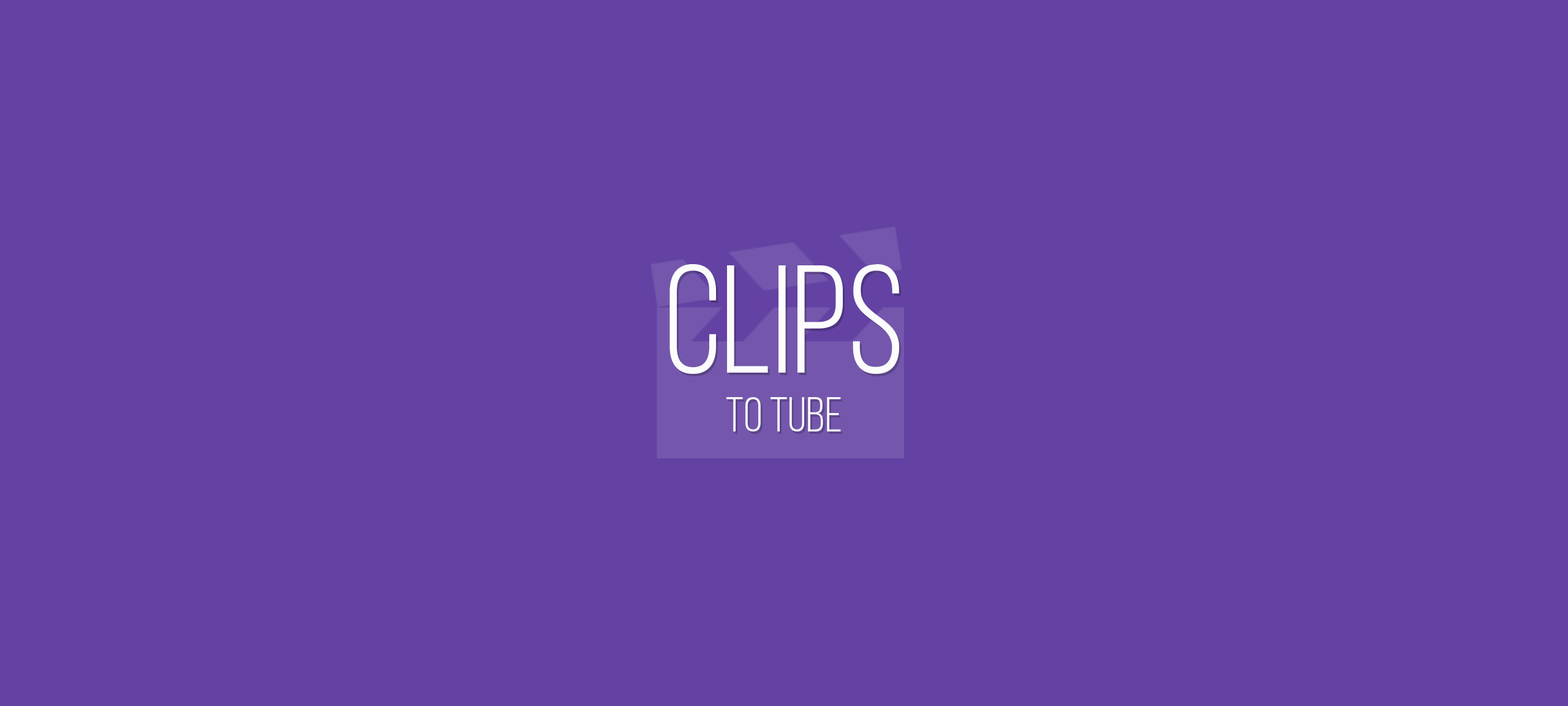
<style>
.page{position:relative;width:1568px;height:706px;background:#6342a3}
.page>*{position:absolute;margin:0}
.t1{font:49px/14.7px "BebasNeueBook";color:#fcfcfc}
.t2{font:153.1px/14.7px "BebasNeueBook";color:#fcfcfc}
</style>
<div class="page">
<p class="t1" style="left:669px;top:264px;width:230px;height:167px;text-align:center"><span class="t2">CLIPS<br><br></span><br><br>to tube</p>
</div>
